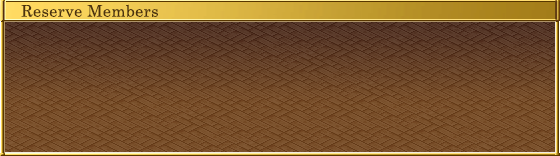
<style>
.page{position:relative;width:560px;height:156px}
.page>*{position:absolute;margin:0}
.t1{font:16px "CenturySchoolbook";letter-spacing:0.025em;color:#4b320e}
</style>
<div class="page">
<p class="t1" style="left:21px;top:4px;width:137px;height:13px">Reserve Members</p>
</div>
